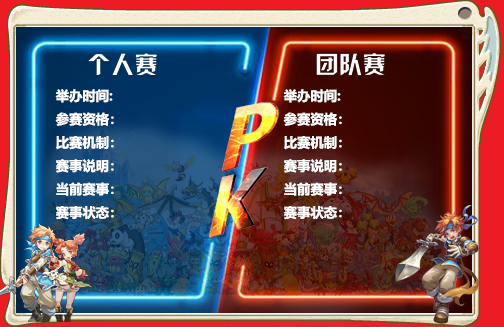
<style>
.page{position:relative;width:504px;height:327px}
.page>*{position:absolute;margin:0}
.t1{font:13.3px "MicrosoftYaHei-Bold";color:#ffffff}
</style>
<div class="page">
<p class="t1" style="left:55px;top:89px;width:59px;height:131px">举办时间:<br>参赛资格：<br>比赛机制：<br>赛事说明：<br>当前赛事：<br>赛事状态：</p>
<p class="t1" style="left:283px;top:89px;width:59px;height:131px">举办时间:<br>参赛资格：<br>比赛机制：<br>赛事说明：<br>当前赛事：<br>赛事状态：</p>
</div>
